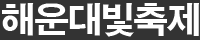
<style>
.page{position:relative;width:200px;height:40px;background:#333333}
.page>*{position:absolute;margin:0}
.t1{font:35.1px "H2gtrE";letter-spacing:-0.06em;color:#ffffff}
</style>
<div class="page">
<p class="t1" style="left:2px;top:3px;width:197px;height:34px">해운대빛축제</p>
</div>
